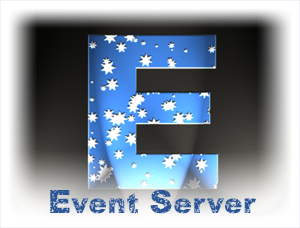
<style>
.page{position:relative;width:300px;height:228px}
.page>*{position:absolute;margin:0}
.t1{font:26.9px "Quasart";letter-spacing:0.027em;color:#295596}
.t2{font:31.1px "Quasart";letter-spacing:0.027em;color:#295596}
</style>
<div class="page">
<p class="t1" style="left:50px;top:190px;width:206px;height:24px"><span class="t2">E</span>vent <span class="t2">S</span>erver</p>
</div>
